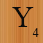
<style>
.page{position:relative;width:43px;height:43px}
.page>*{position:absolute;margin:0}
.t1{font:30px "TimesNewRomanPSMT";color:#0c0c0b}
.t2{font:12px "TimesNewRomanPSMT";color:#0c0c0b}
</style>
<div class="page">
<p class="t1" style="left:12px;top:7px;width:22px;height:20px">Y</p>
<p class="t2" style="left:32px;top:28px;width:7px;height:9px">4</p>
</div>
